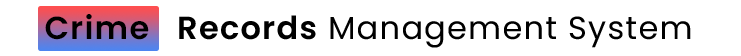
<style>
.page{position:relative;width:741px;height:56px;background:#ffffff}
.page>*{position:absolute;margin:0}
.t1{font:31.9px "Poppins-Regular";letter-spacing:0.04em;color:#000000}
.t2{font:31.9px "Poppins-SemiBold";letter-spacing:0.04em;color:#000000}
</style>
<div class="page">
<p class="t1" style="left:45px;top:14px;width:646px;height:34px"><span class="t2">Crime   Records</span> Management System</p>
</div>
